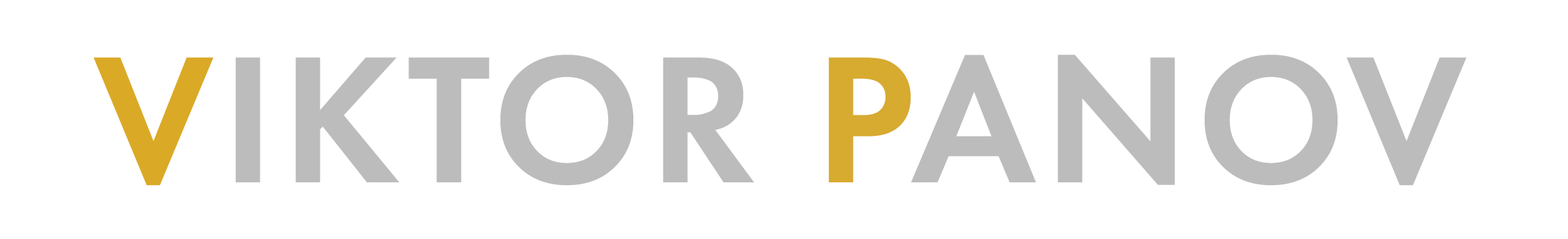
<style>
.page{position:relative;width:1568px;height:239px;background:#ffffff}
.page>*{position:absolute;margin:0}
.t1{font:186.7px "FuturaDemiC";letter-spacing:0.04em;color:#bcbcbc}
.t2{font:186.7px "FuturaDemiC";letter-spacing:0.04em;color:#daa926}
.t3{font:186.7px "FuturaDemiC";letter-spacing:0.04em;color:#d7aa30}
</style>
<div class="page">
<p class="t1" style="left:93px;top:55px;width:1373px;height:130px"><span class="t2">V</span>IKTOR <span class="t3">P</span>ANOV</p>
</div>
